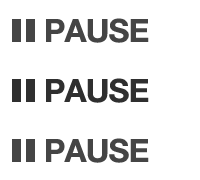
<style>
.page{position:relative;width:200px;height:180px;background:#ffffff}
.page>*{position:absolute;margin:0}
.t1{font:32px "HelveticaNeue-Bold";letter-spacing:-0.025em;color:#454545}
</style>
<div class="page">
<p class="t1" style="left:46px;top:18px;width:103px;height:25px">PAUSE</p>
<p class="t1" style="left:46px;top:78px;width:103px;height:25px">PAUSE</p>
<p class="t1" style="left:46px;top:138px;width:103px;height:25px">PAUSE</p>
</div>
